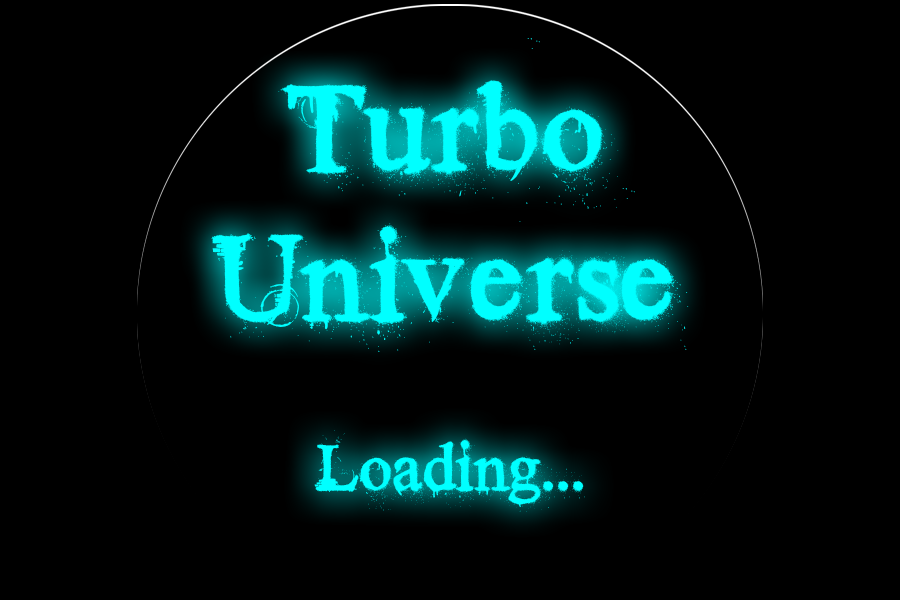
<style>
.page{position:relative;width:900px;height:600px;background:#000000}
.page>*{position:absolute;margin:0}
.t1{font:125px "TimesNewYorker";color:#00ffff}
.t2{font:66.7px "TimesNewYorker";color:#00ffff}
</style>
<div class="page">
<p class="t1" style="left:211px;top:38px;width:478px;height:314px;text-align:center">Turbo<br>Universe</p>
<p class="t2" style="left:314px;top:430px;width:271px;height:82px">Loading...</p>
</div>
